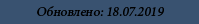
<style>
.page{position:relative;width:199px;height:24px;background:#395270}
.page>*{position:absolute;margin:0}
.t1{font:13.3px "MinionPro-Regular";color:#000000;font-style:italic}
</style>
<div class="page">
<p class="t1" style="left:37px;top:6px;width:127px;height:11px">Обновлено: 18.07.2019</p>
</div>
